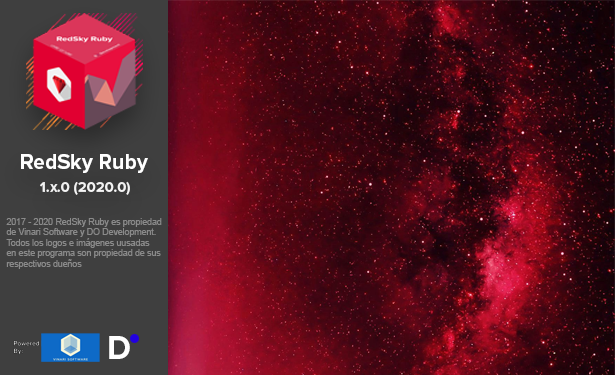
<style>
.page{position:relative;width:615px;height:375px}
.page>*{position:absolute;margin:0}
.t1{font:21.4px "ProximaNova-Bold";color:#ffffff}
.t2{font:14.7px "ProximaNova-Bold";color:#ffffff}
.t3{font:8.7px "ArialMT";color:#8a8a8a}
.t4{font:33.3px "ProximaNova-Bold";color:#ffffff}
</style>
<div class="page">
<p class="t1" style="left:21px;top:154px;width:127px;height:19px">RedSky Ruby</p>
<p class="t2" style="left:40px;top:181px;width:90px;height:14px">1.x.0 (2020.0)</p>
<p class="t3" style="left:6px;top:218px;width:156px;height:51px">2017 - 2020 RedSky Ruby es propiedad<br>de Vinari Software y DO Development.<br>Todos los logos e imágenes uusadas<br>en este programa son propiedad de sus<br>respectivos dueños</p>
<p class="t4" style="left:109px;top:336px;width:21px;height:23px">D</p>
</div>
